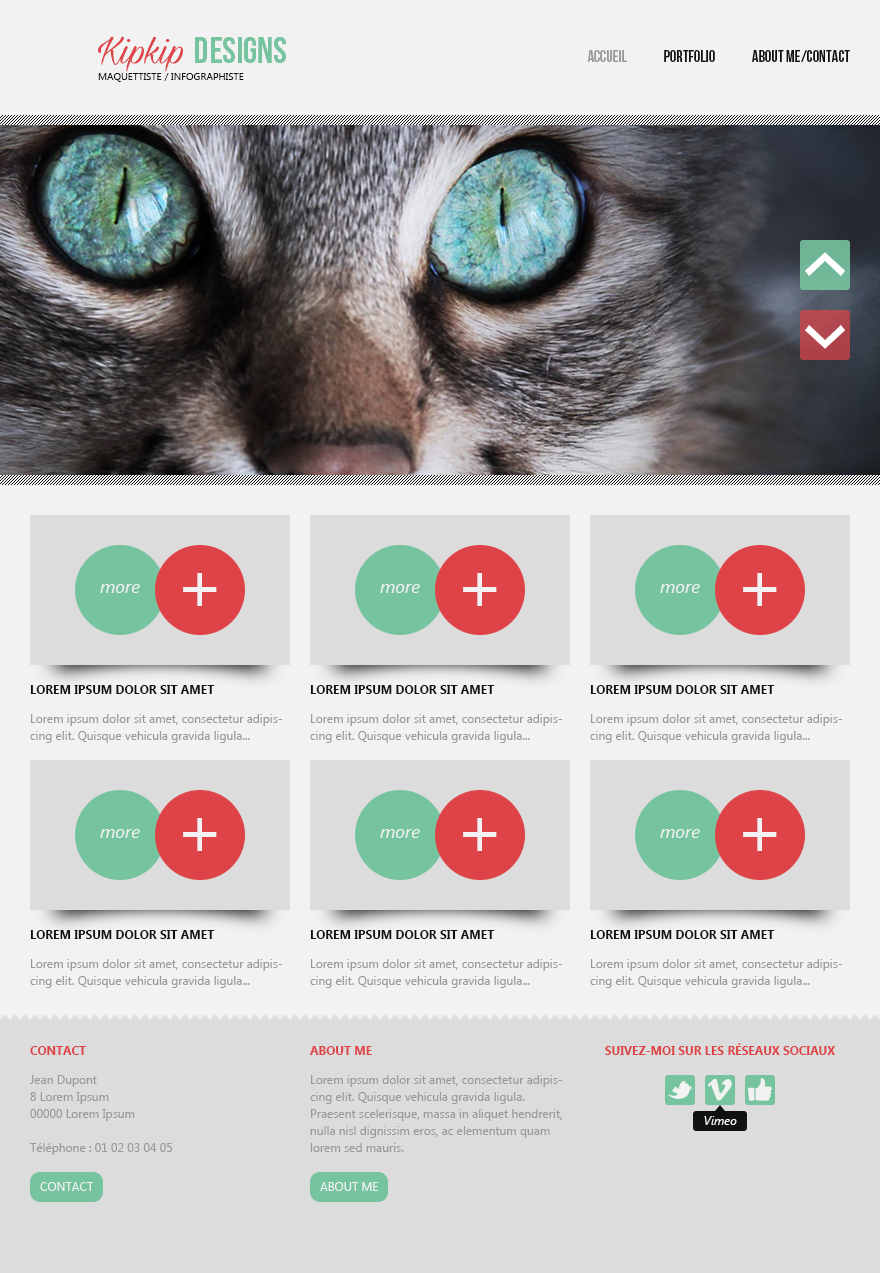
<style>
.page{position:relative;width:880px;height:1273px;background:#dcdcdc}
.page>*{position:absolute;margin:0}
.t1{font:10px/17px "SegoeUI";color:#111111}
.t2{font:44px/17px "MilasianCircaPERSONAL";color:#de4347}
.t3{font:37px/17px "BebasNeue";color:#76c39f}
.t4{font:16px "BebasNeue";color:#999999}
.t5{font:16px "BebasNeue";color:#111111}
.t6{font:72px "SegoeUI";color:#f2f2f2}
.t7{font:18px "SegoeUI-Italic";color:#f2f2f2}
.t8{font:12px "SegoeUI-Bold";color:#111111}
.t9{font:12px/17px "SegoeUI";color:#999999}
.t10{font:12px "SegoeUI-Bold";color:#de4347}
.t11{font:12px "SegoeUI-Italic";color:#f2f2f2}
.t12{font:12px "SegoeUI";color:#f2f2f2}
</style>
<div class="page">
<p class="t1" style="left:98px;top:36px;width:188px;height:46px"><span class="t2">Kipkip </span><span class="t3">DESIGNS<br></span>MAQUETTISTE / INFOGRAPHISTE</p>
<p class="t4" style="left:587px;top:50px;width:40px;height:12px">Accueil</p>
<p class="t5" style="left:664px;top:50px;width:51px;height:12px">Portfolio</p>
<p class="t5" style="left:752px;top:50px;width:98px;height:12px">About me/Contact</p>
<p class="t6" style="left:183px;top:573px;width:34px;height:33px">+</p>
<p class="t6" style="left:463px;top:573px;width:34px;height:33px">+</p>
<p class="t6" style="left:743px;top:573px;width:34px;height:33px">+</p>
<p class="t7" style="left:100px;top:584px;width:40px;height:9px">more</p>
<p class="t7" style="left:380px;top:584px;width:40px;height:9px">more</p>
<p class="t7" style="left:660px;top:584px;width:40px;height:9px">more</p>
<p class="t8" style="left:30px;top:685px;width:185px;height:9px">LOREM IPSUM DOLOR SIT AMET</p>
<p class="t8" style="left:310px;top:685px;width:185px;height:9px">LOREM IPSUM DOLOR SIT AMET</p>
<p class="t8" style="left:590px;top:685px;width:185px;height:9px">LOREM IPSUM DOLOR SIT AMET</p>
<p class="t9" style="left:30px;top:714px;width:252px;height:29px">Lorem ipsum dolor sit amet, consectetur adipiscing elit. Quisque vehicula gravida ligula...</p>
<p class="t9" style="left:310px;top:714px;width:252px;height:29px">Lorem ipsum dolor sit amet, consectetur adipiscing elit. Quisque vehicula gravida ligula...</p>
<p class="t9" style="left:590px;top:714px;width:252px;height:29px">Lorem ipsum dolor sit amet, consectetur adipiscing elit. Quisque vehicula gravida ligula...</p>
<p class="t6" style="left:183px;top:818px;width:34px;height:33px">+</p>
<p class="t6" style="left:463px;top:818px;width:34px;height:33px">+</p>
<p class="t6" style="left:743px;top:818px;width:34px;height:33px">+</p>
<p class="t7" style="left:100px;top:829px;width:40px;height:9px">more</p>
<p class="t7" style="left:380px;top:829px;width:40px;height:9px">more</p>
<p class="t7" style="left:660px;top:829px;width:40px;height:9px">more</p>
<p class="t8" style="left:30px;top:930px;width:185px;height:9px">LOREM IPSUM DOLOR SIT AMET</p>
<p class="t8" style="left:310px;top:930px;width:185px;height:9px">LOREM IPSUM DOLOR SIT AMET</p>
<p class="t8" style="left:590px;top:930px;width:185px;height:9px">LOREM IPSUM DOLOR SIT AMET</p>
<p class="t9" style="left:30px;top:959px;width:252px;height:29px">Lorem ipsum dolor sit amet, consectetur adipiscing elit. Quisque vehicula gravida ligula...</p>
<p class="t9" style="left:310px;top:959px;width:252px;height:29px">Lorem ipsum dolor sit amet, consectetur adipiscing elit. Quisque vehicula gravida ligula...</p>
<p class="t9" style="left:590px;top:959px;width:252px;height:29px">Lorem ipsum dolor sit amet, consectetur adipiscing elit. Quisque vehicula gravida ligula...</p>
<p class="t10" style="left:30px;top:1046px;width:56px;height:9px">CONTACT</p>
<p class="t10" style="left:310px;top:1046px;width:62px;height:9px">ABOUT ME</p>
<p class="t10" style="left:605px;top:1043px;width:230px;height:12px">SUIVEZ-MOI SUR LES RÉSEAUX SOCIAUX</p>
<p class="t9" style="left:30px;top:1075px;width:142px;height:80px">Jean Dupont<br>8 Lorem Ipsum<br>00000 Lorem Ipsum<br><br>Téléphone : 01 02 03 04 05</p>
<p class="t9" style="left:310px;top:1075px;width:252px;height:77px">Lorem ipsum dolor sit amet, consectetur adipiscing elit. Quisque vehicula gravida ligula. Praesent scelerisque, massa in aliquet hendrerit, nulla nisl dignissim eros, ac elementum quam lorem sed mauris.</p>
<p class="t11" style="left:704px;top:1116px;width:33px;height:9px">Vimeo</p>
<p class="t12" style="left:40px;top:1182px;width:54px;height:9px">CONTACT</p>
<p class="t12" style="left:320px;top:1182px;width:58px;height:9px">ABOUT ME</p>
</div>
